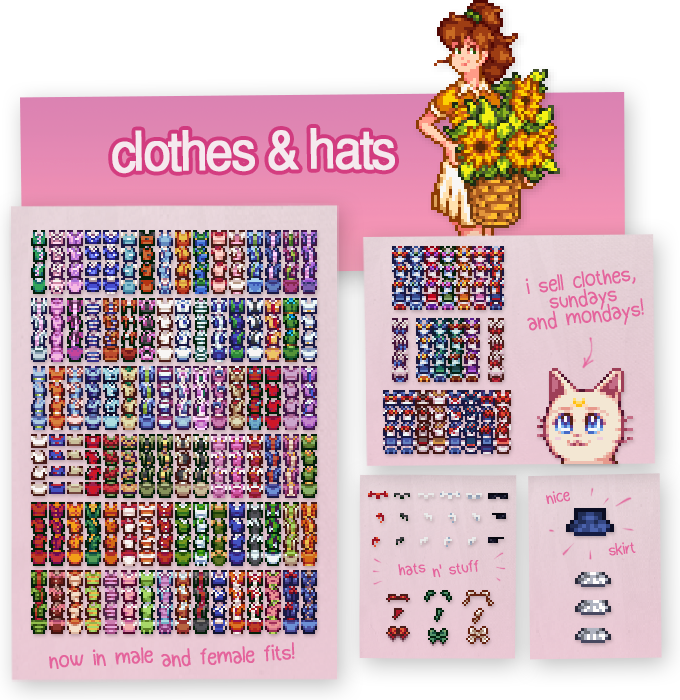
<style>
.page{position:relative;width:680px;height:700px}
.page>*{position:absolute;margin:0}
.t1{font:54px "Helvetica-Normal";letter-spacing:-0.06em;color:#f5e9ee;font-weight:bold;scale:0.9 1}
.t2{font:24px/18px "Dudu_Calligraphy";letter-spacing:-0.06em;color:#e4649c;font-weight:bold;scale:0.9 1}
.t3{font:18px "Dudu_Calligraphy";letter-spacing:-0.06em;color:#e4649c;font-weight:bold;scale:0.9 1}
.t4{font:24px "Dudu_Calligraphy";letter-spacing:-0.06em;color:#e4649c;font-weight:bold;scale:0.9 1}
</style>
<div class="page">
<p class="t1" style="left:112px;top:128px;width:283px;height:46px;rotate:-1deg">clothes &amp; hats</p>
<p class="t2" style="left:525px;top:269px;width:119px;height:62px;text-align:center;rotate:-8deg">i sell clothes,<br>sundays<br> and mondays!</p>
<p class="t3" style="left:546px;top:491px;width:24px;height:13px;rotate:-10deg">nice</p>
<p class="t3" style="left:608px;top:542px;width:28px;height:14px;rotate:-8deg">skirt</p>
<p class="t3" style="left:398px;top:563px;width:28px;height:13px;rotate:-6deg">hats</p>
<p class="t3" style="left:432px;top:560px;width:47px;height:18px;rotate:-8deg">n' stuff</p>
<p class="t4" style="left:49px;top:647px;width:104px;height:22px;rotate:-3deg">now in male</p>
<p class="t4" style="left:161px;top:642px;width:134px;height:25px;rotate:-3deg">and female fits!</p>
</div>
